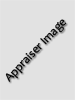
<style>
.page{position:relative;width:75px;height:100px;background:#e2e2e2}
.page>*{position:absolute;margin:0}
.t1{font:12px "Candara";color:#000000}
</style>
<div class="page">
<p class="t1" style="left:5px;top:19px;width:62px;height:63px;rotate:-46deg">Appraiser Image</p>
</div>
